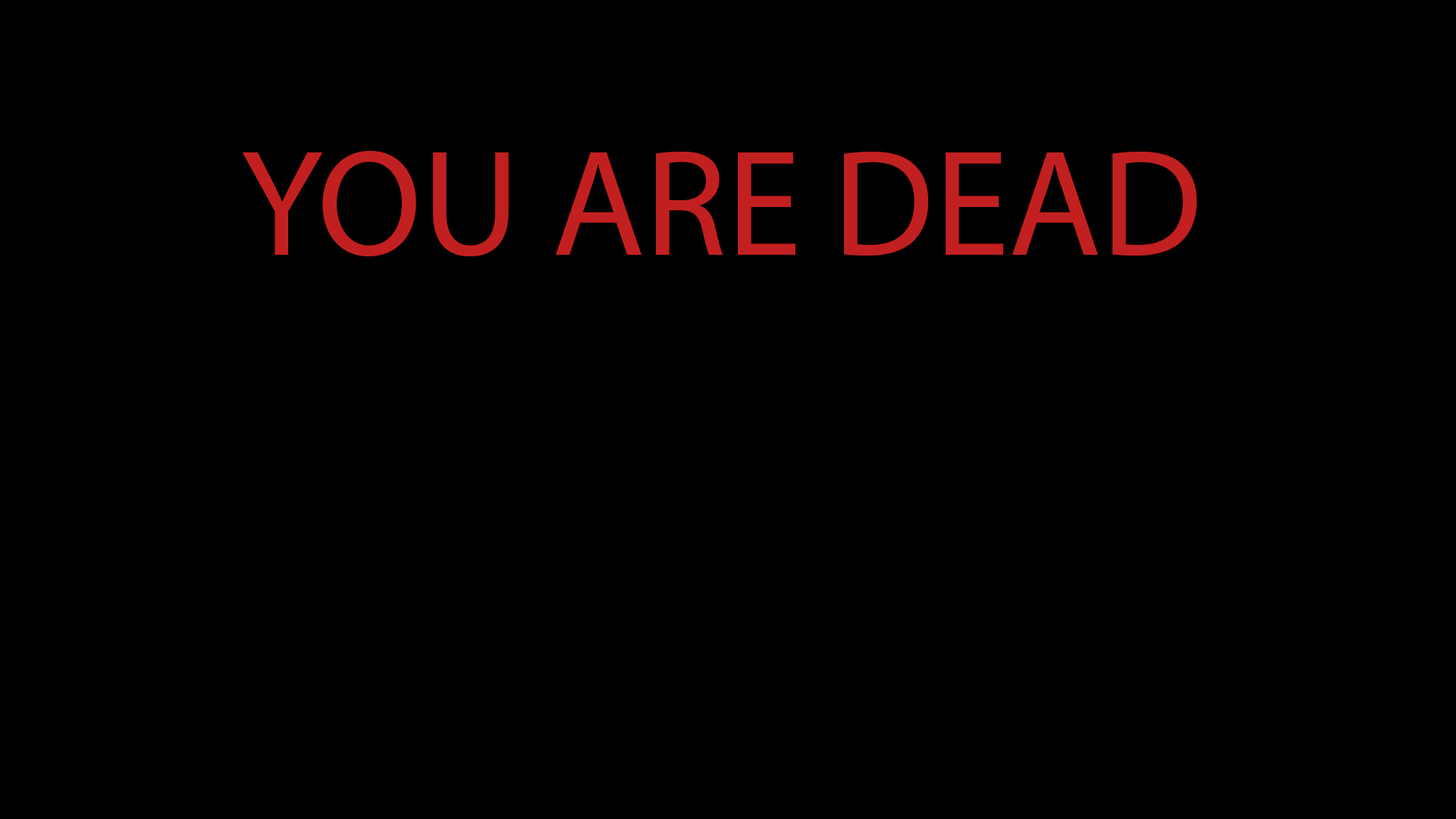
<style>
.page{position:relative;width:1456px;height:819px;background:#000000}
.page>*{position:absolute;margin:0}
.t1{font:151.7px "MyriadPro-Regular";color:#c22020}
</style>
<div class="page">
<p class="t1" style="left:242px;top:150px;width:955px;height:106px">YOU ARE DEAD</p>
</div>
